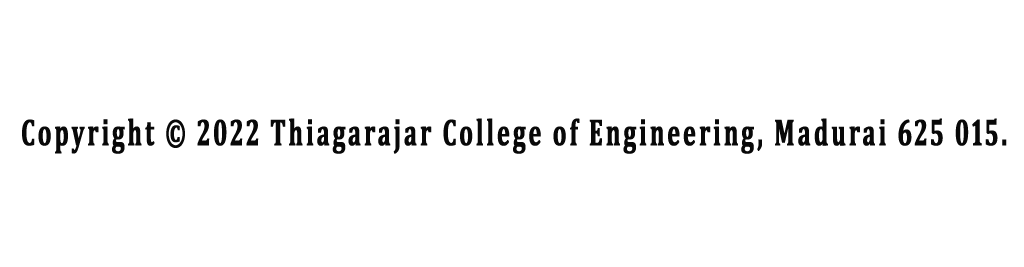
<style>
.page{position:relative;width:1024px;height:267px;background:#ffffff}
.page>*{position:absolute;margin:0}
.t1{font:37.8px "Cambria-Bold";letter-spacing:0.1em;color:#080808;font-weight:bold;scale:0.64 1}
</style>
<div class="page">
<p class="t1" style="left:22px;top:118px;width:985px;height:36px">Copyright © 2022 Thiagarajar College of Engineering, Madurai 625 015.</p>
</div>
